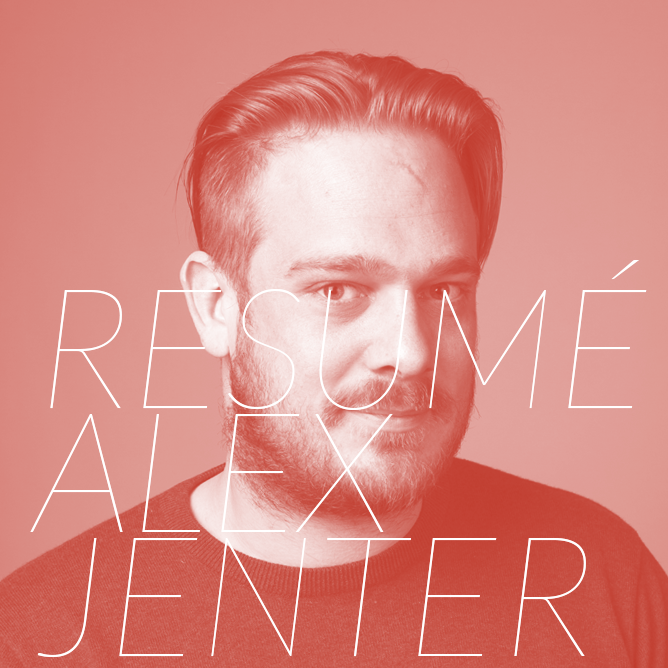
<style>
.page{position:relative;width:668px;height:668px}
.page>*{position:absolute;margin:0}
.t1{font:168px/124px "Lato-HairlineItalic";color:#ffffff}
</style>
<div class="page">
<p class="t1" style="left:30px;top:260px;width:617px;height:397px">RESUMÉ<br>ALEX<br>JENTER</p>
</div>
